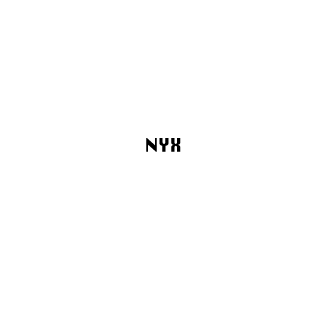
<style>
.page{position:relative;width:311px;height:311px;background:#ffffff}
.page>*{position:absolute;margin:0}
.t1{font:17.7px "Krungthep";color:#000000}
</style>
<div class="page">
<p class="t1" style="left:146px;top:138px;width:35px;height:14px">NYX</p>
</div>
